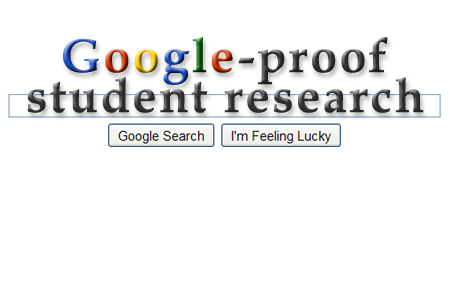
<style>
.page{position:relative;width:450px;height:300px;background:#ffffff}
.page>*{position:absolute;margin:0}
.t1{font:48px "BookAntiqua-Bold";letter-spacing:0.055em}
.t2{font:48px "BookAntiqua-Bold";letter-spacing:0.055em;color:#333333}
</style>
<div class="page">
<p class="t1" style="left:63px;top:37px;width:170px;height:48px">Google</p>
<p class="t2" style="left:238px;top:37px;width:150px;height:48px">-proof</p>
<p class="t2" style="left:27px;top:77px;width:397px;height:36px">student research</p>
</div>
